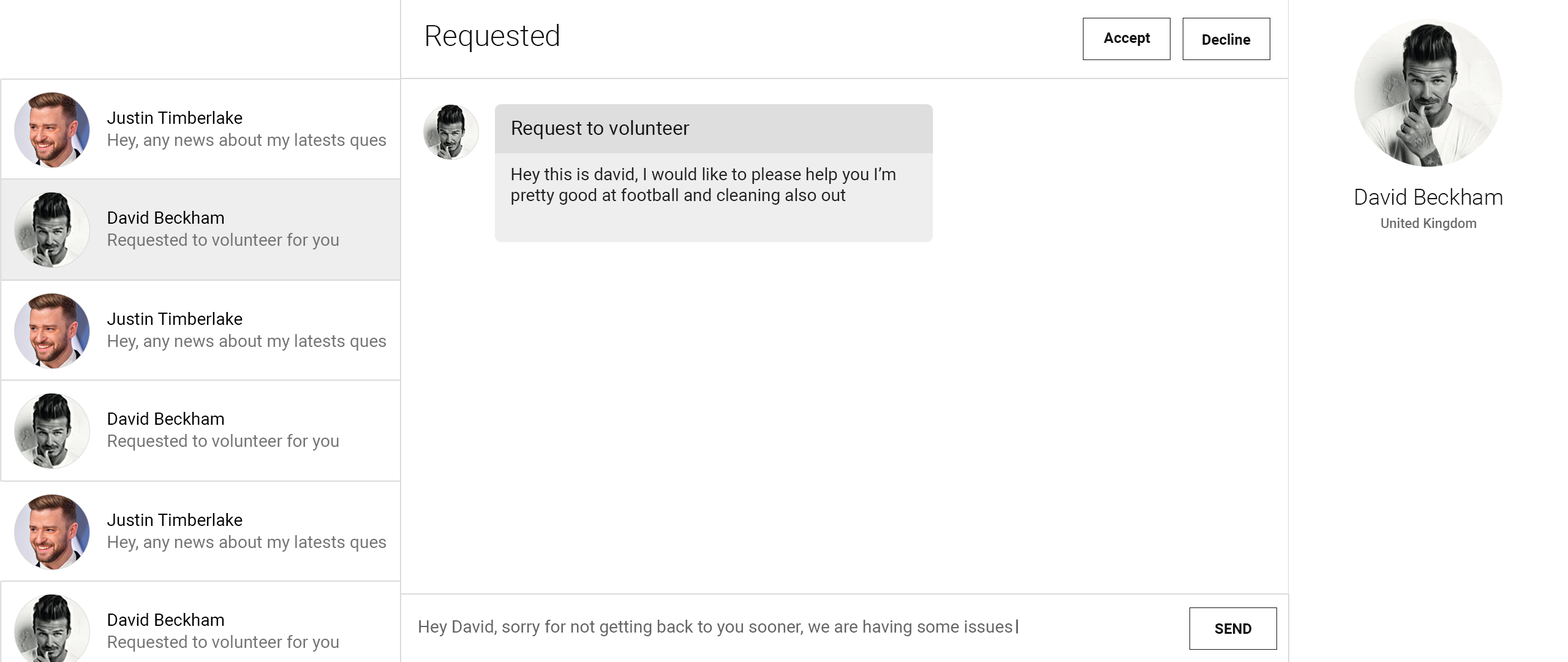
<style>
.page{position:relative;width:1568px;height:662px;background:#ffffff}
.page>*{position:absolute;margin:0}
.t1{font:29.4px "Roboto-Light";color:#141414}
.t2{font:14.7px "Roboto-Bold";color:#131313}
.t3{font:17.2px "Roboto-Regular";color:#000000}
.t4{font:19.6px "Roboto-Regular";color:#141414}
.t5{font:17.2px "Roboto-Regular";color:#747474}
.t6{font:17.2px "Roboto-Regular";color:#232323}
.t7{font:22.1px "Roboto-Light";color:#141414}
.t8{font:13.5px "Roboto-Medium";color:#6c6c6c}
.t9{font:17.2px "Roboto-Regular";color:#646464}
</style>
<div class="page">
<p class="t1" style="left:426px;top:24px;width:133px;height:28px">Requested</p>
<p class="t2" style="left:1104px;top:32px;width:46px;height:14px">Accept</p>
<p class="t2" style="left:1202px;top:33px;width:49px;height:12px">Decline</p>
<p class="t3" style="left:107px;top:111px;width:136px;height:13px">Justin Timberlake</p>
<p class="t4" style="left:512px;top:120px;width:178px;height:19px">Request to volunteer</p>
<p class="t5" style="left:108px;top:133px;width:278px;height:16px">Hey, any news about my latests ques</p>
<p class="t6" style="left:511px;top:167px;width:384px;height:38px;text-align:right">Hey this is david, I would like to please help you I’m pretty good at football and cleaning also out</p>
<p class="t7" style="left:1355px;top:188px;width:147px;height:17px">David Beckham</p>
<p class="t3" style="left:108px;top:211px;width:116px;height:13px">David Beckham</p>
<p class="t8" style="left:1381px;top:217px;width:95px;height:13px">United Kingdom</p>
<p class="t5" style="left:108px;top:233px;width:231px;height:16px">Requested to volunteer for you</p>
<p class="t3" style="left:107px;top:312px;width:136px;height:13px">Justin Timberlake</p>
<p class="t5" style="left:108px;top:334px;width:278px;height:16px">Hey, any news about my latests ques</p>
<p class="t3" style="left:108px;top:412px;width:116px;height:12px">David Beckham</p>
<p class="t5" style="left:108px;top:434px;width:231px;height:16px">Requested to volunteer for you</p>
<p class="t3" style="left:107px;top:513px;width:136px;height:13px">Justin Timberlake</p>
<p class="t5" style="left:108px;top:535px;width:278px;height:16px">Hey, any news about my latests ques</p>
<p class="t3" style="left:108px;top:612px;width:116px;height:13px">David Beckham</p>
<p class="t9" style="left:419px;top:619px;width:593px;height:17px">Hey David, sorry for not getting back to you sooner, we are having some issues</p>
<p class="t2" style="left:1215px;top:623px;width:37px;height:10px">SEND</p>
<p class="t5" style="left:108px;top:635px;width:231px;height:16px">Requested to volunteer for you</p>
</div>
